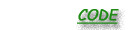
<style>
.page{position:relative;width:135px;height:30px;background:#ffffff}
.page>*{position:absolute;margin:0}
.t1{font:14px "ComicSansMS";color:#1c8a13;font-variant:small-caps;font-weight:bold;font-style:italic;text-decoration:underline}
</style>
<div class="page">
<p class="t1" style="left:77px;top:9px;width:42px;height:15px">CODE</p>
</div>
